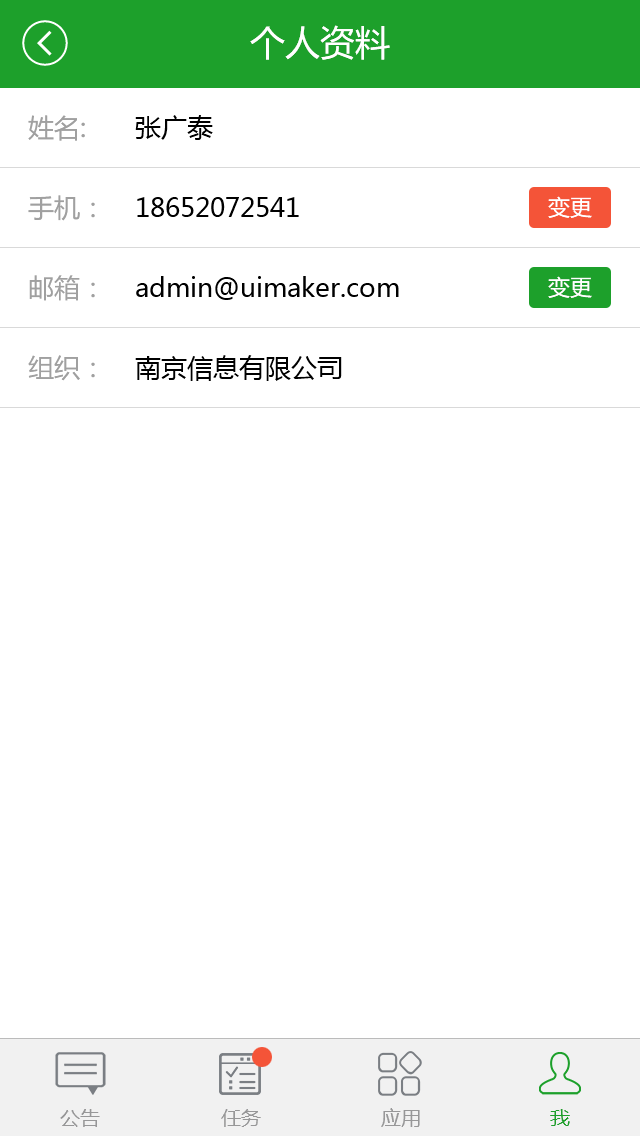
<style>
.page{position:relative;width:640px;height:1136px;background:#ffffff}
.page>*{position:absolute;margin:0}
.t1{font:35px "MicrosoftYaHei";color:#ffffff}
.t2{font:26px/80px "MicrosoftYaHei";color:#a0a0a0}
.t3{font:26px/80px "MicrosoftYaHei";color:#000000}
.t4{font:22px "MicrosoftYaHei";color:#ffffff}
.t5{font:20px "MicrosoftYaHei";color:#979798}
.t6{font:20px "MicrosoftYaHei";color:#1da02b}
</style>
<div class="page">
<p class="t1" style="left:250px;top:25px;width:140px;height:35px">个人资料</p>
<p class="t2" style="left:28px;top:115px;width:67px;height:266px">姓名:<br>手机：<br>邮箱：<br>组织：</p>
<p class="t3" style="left:135px;top:115px;width:264px;height:266px">张广泰<br>18652072541<br>admin@uimaker.com<br>南京信息有限公司</p>
<p class="t4" style="left:548px;top:196px;width:44px;height:22px">变更</p>
<p class="t4" style="left:548px;top:276px;width:44px;height:22px">变更</p>
<p class="t5" style="left:60px;top:1109px;width:40px;height:18px">公告</p>
<p class="t5" style="left:221px;top:1109px;width:40px;height:18px">任务</p>
<p class="t5" style="left:381px;top:1108px;width:39px;height:19px">应用</p>
<p class="t6" style="left:550px;top:1109px;width:20px;height:17px">我</p>
</div>
